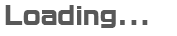
<style>
.page{position:relative;width:177px;height:36px;background:#ffffff}
.page>*{position:absolute;margin:0}
.t1{font:24px "RFGSanSrf-Bd-83pv-RKSJ-H";letter-spacing:-0.025em;color:#585858}
</style>
<div class="page">
<p class="t1" style="left:5px;top:5px;width:143px;height:23px">Loading...</p>
</div>
